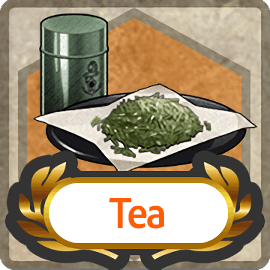
<style>
.page{position:relative;width:270px;height:270px}
.page>*{position:absolute;margin:0}
.t1{font:45px "AdobeClean-Bold";letter-spacing:-0.04em;color:#ff5d00;scale:0.9 1}
</style>
<div class="page">
<p class="t1" style="left:109px;top:198px;width:56px;height:31px">Tea</p>
</div>
